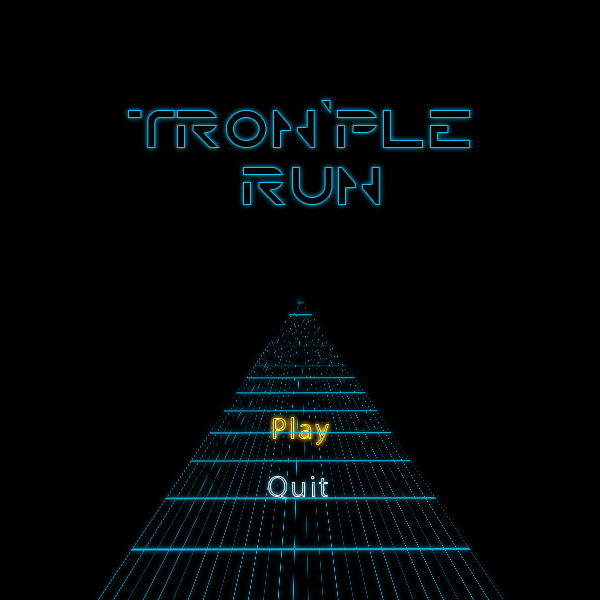
<style>
.page{position:relative;width:600px;height:600px;background:#000000}
.page>*{position:absolute;margin:0}
.t1{font:48px "CRRNTN-Regular";letter-spacing:0.075em;color:#000000}
.t2{font:30px "MyriadPro-Regular";letter-spacing:0.075em}
</style>
<div class="page">
<p class="t1" style="left:128px;top:100px;width:343px;height:105px;text-align:center">TRON’PLE<br> RUN</p>
<p class="t2" style="left:273px;top:417px;width:56px;height:29px">Play</p>
<p class="t2" style="left:268px;top:476px;width:60px;height:24px">Quit</p>
</div>
